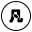
<style>
.page{position:relative;width:32px;height:32px;background:#ffffff}
.page>*{position:absolute;margin:0}
.t1{font:14.7px "STHupo";color:#000000}
</style>
<div class="page">
<p class="t1" style="left:9px;top:9px;width:15px;height:14px">凡</p>
</div>
